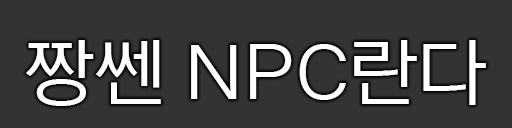
<style>
.page{position:relative;width:512px;height:128px;background:#333333}
.page>*{position:absolute;margin:0}
.t1{font:72px "NEXONLv2GothicRegular";color:#ffffff;scale:1.1 1}
</style>
<div class="page">
<p class="t1" style="left:26px;top:40px;width:460px;height:66px">짱쎈 NPC란다</p>
</div>
